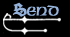
<style>
.page{position:relative;width:70px;height:37px;background:#000000}
.page>*{position:absolute;margin:0}
.t1{font:18px "Celtic-CondensedNormal";color:#94b2da}
.t2{font:18px "CathedralExtendedNormal";color:#94b2da}
</style>
<div class="page">
<p class="t1" style="left:12px;top:2px;width:47px;height:15px"><span class="t2">S</span>end</p>
</div>
